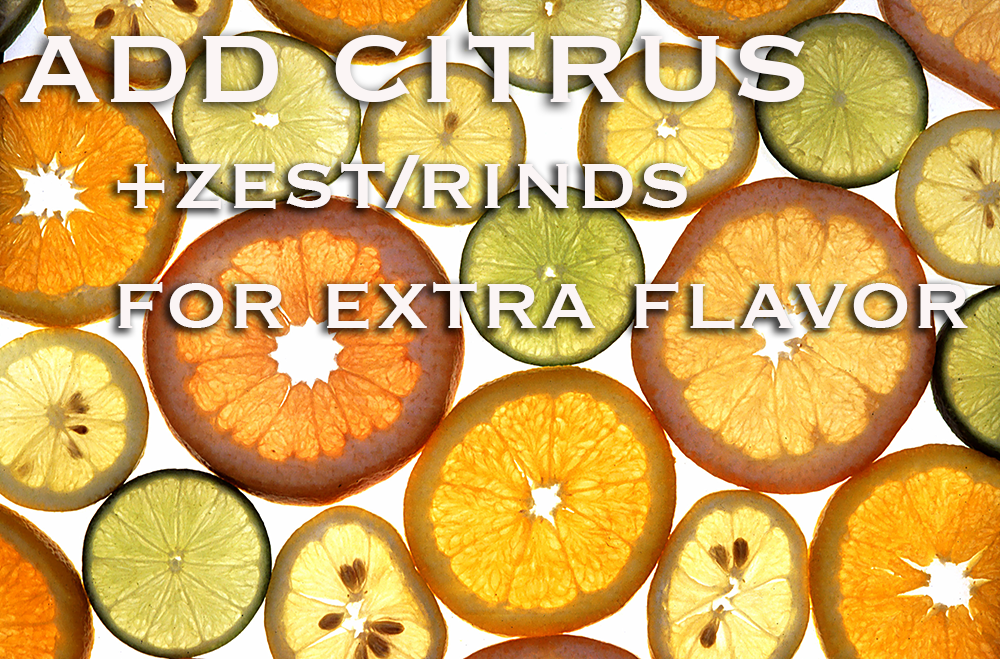
<style>
.page{position:relative;width:1000px;height:659px}
.page>*{position:absolute;margin:0}
.t1{font:150px "Copperplate";color:#fbf5f5}
.t2{font:100px "Copperplate";color:#fbf5f5}
</style>
<div class="page">
<p class="t1" style="left:20px;top:32px;width:785px;height:70px">add citrus</p>
<p class="t2" style="left:117px;top:155px;width:851px;height:174px"><span class="t1"><br></span>+zest/rinds <br>for extra flavor</p>
</div>
